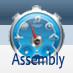
<style>
.page{position:relative;width:73px;height:73px}
.page>*{position:absolute;margin:0}
.t1{font:18px "Candara";color:#0c397d;scale:0.73 1}
</style>
<div class="page">
<p class="t1" style="left:11px;top:52px;width:54px;height:17px">Assembly</p>
</div>
